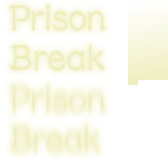
<style>
.page{position:relative;width:168px;height:160px;background:#ffffff}
.page>*{position:absolute;margin:0}
.t1{font:48.4px/40px "DFLeiShoStd-W5";letter-spacing:-0.025em;color:#efeebe;scale:0.82 1}
.t2{font:48.4px/40px "DFLeiShoStd-W5";color:#efeebe;scale:0.82 1}
</style>
<div class="page">
<p class="t1" style="left:10px;top:4px;width:95px;height:67px">Prison<br><span class="t2">Break</span></p>
</div>
